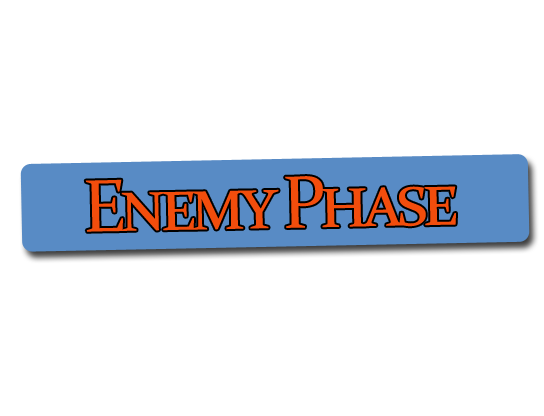
<style>
.page{position:relative;width:544px;height:416px;background:#ffffff}
.page>*{position:absolute;margin:0}
.t1{font:75px "Constantia";letter-spacing:-0.1em;color:#f24d0c;font-variant:small-caps}
</style>
<div class="page">
<p class="t1" style="left:85px;top:176px;width:371px;height:56px;rotate:-1deg">Enemy Phase</p>
</div>
